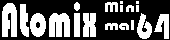
<style>
.page{position:relative;width:170px;height:40px;background:#000000}
.page>*{position:absolute;margin:0}
.t1{font:50px "Bauhaus93";color:#ffffff;scale:0.64 1}
.t2{font:15.2px "Bauhaus93";color:#ffffff;scale:1.22 1}
.t3{font:37px "Bauhaus93";color:#ffffff;scale:0.81 1}
</style>
<div class="page">
<p class="t1" style="left:2px;top:2px;width:94px;height:35px">Atomix</p>
<p class="t2" style="left:105px;top:1px;width:34px;height:29px">Mini<br>mal</p>
<p class="t3" style="left:137px;top:13px;width:32px;height:26px">64</p>
</div>
